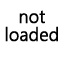
<style>
.page{position:relative;width:64px;height:64px;background:#ffffff}
.page>*{position:absolute;margin:0}
.t1{font:19px/18px "SegoeUISymbol";color:#000000;scale:0.95 1}
</style>
<div class="page">
<p class="t1" style="left:5px;top:10px;width:53px;height:32px;text-align:center">not<br>loaded</p>
</div>
